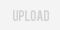
<style>
.page{position:relative;width:60px;height:30px;background:#f4f4f4}
.page>*{position:absolute;margin:0}
.t1{font:12px "Bebas";color:#d1d1d1}
</style>
<div class="page">
<p class="t1" style="left:13px;top:10px;width:36px;height:11px">UPLOAD</p>
</div>
